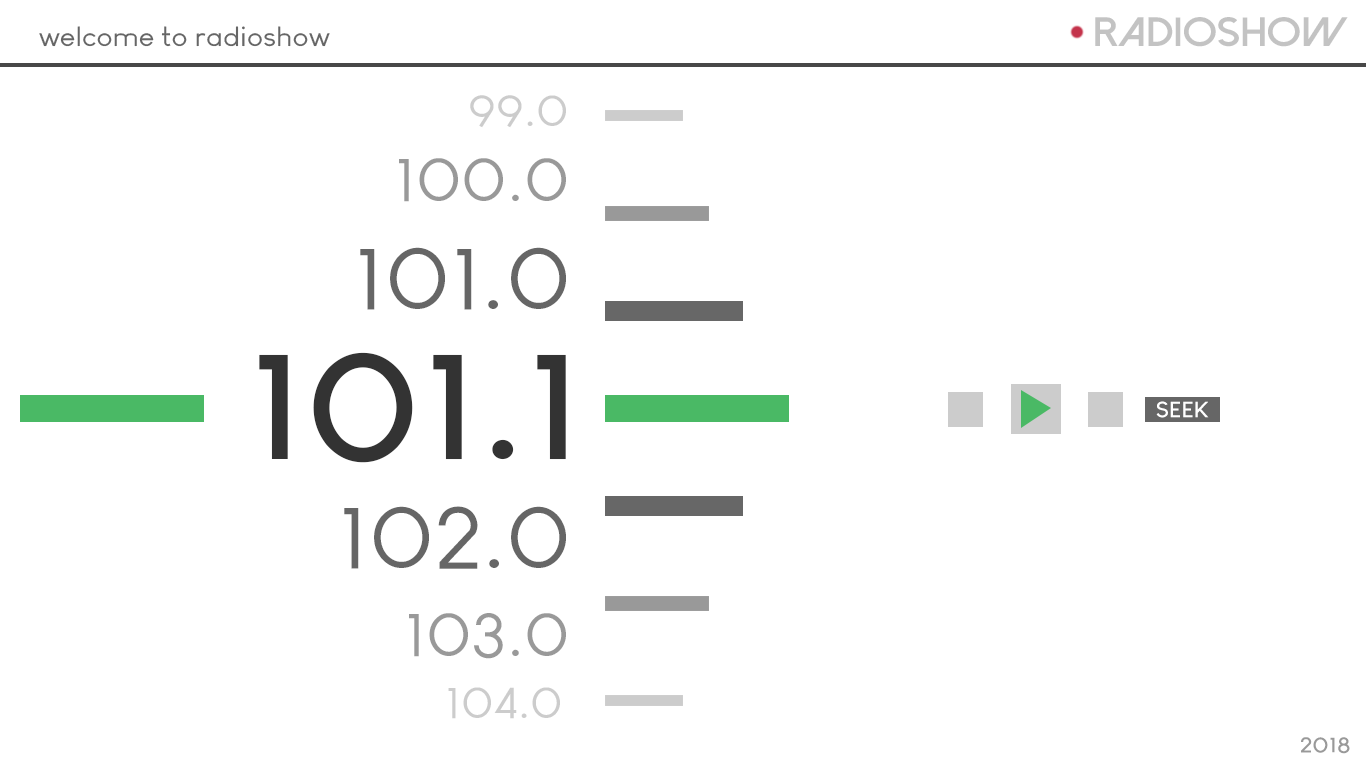
<style>
.page{position:relative;width:1366px;height:768px;background:#ffffff}
.page>*{position:absolute;margin:0}
.t1{font:41px "DolceVitaHeavy-Bold";color:#c3c3c3;scale:1.09 1}
.t2{font:27.3px "LouisGeorgeCafe";color:#666666;scale:1.09 1}
.t3{font:45.5px "LouisGeorgeCafe";color:#cccccc;scale:1.09 1}
.t4{font:63.8px "LouisGeorgeCafe";color:#999999;scale:1.09 1}
.t5{font:91.1px "LouisGeorgeCafe";color:#666666;scale:1.09 1}
.t6{font:154.9px "LouisGeorgeCafe-Bold";color:#333333;scale:1.09 1}
.t7{font:21.8px "LouisGeorgeCafe-Bold";color:#ffffff;scale:1.09 1}
.t8{font:21.8px "LouisGeorgeCafe-Bold";color:#999999;scale:1.09 1}
</style>
<div class="page">
<p class="t1" style="left:1095px;top:17px;width:253px;height:30px">RADIOSHOW</p>
<p class="t2" style="left:39px;top:26px;width:291px;height:21px">welcome to radioshow</p>
<p class="t3" style="left:470px;top:95px;width:96px;height:33px">99.0</p>
<p class="t4" style="left:399px;top:158px;width:167px;height:44px">100.0</p>
<p class="t5" style="left:360px;top:247px;width:206px;height:63px">101.0</p>
<p class="t6" style="left:259px;top:352px;width:307px;height:111px">101.1</p>
<p class="t7" style="left:1156px;top:401px;width:53px;height:17px">SEEK</p>
<p class="t5" style="left:344px;top:506px;width:222px;height:63px">102.0</p>
<p class="t4" style="left:409px;top:613px;width:157px;height:46px">103.0</p>
<p class="t3" style="left:448px;top:687px;width:112px;height:32px">104.0</p>
<p class="t8" style="left:1301px;top:737px;width:49px;height:17px">2018</p>
</div>
